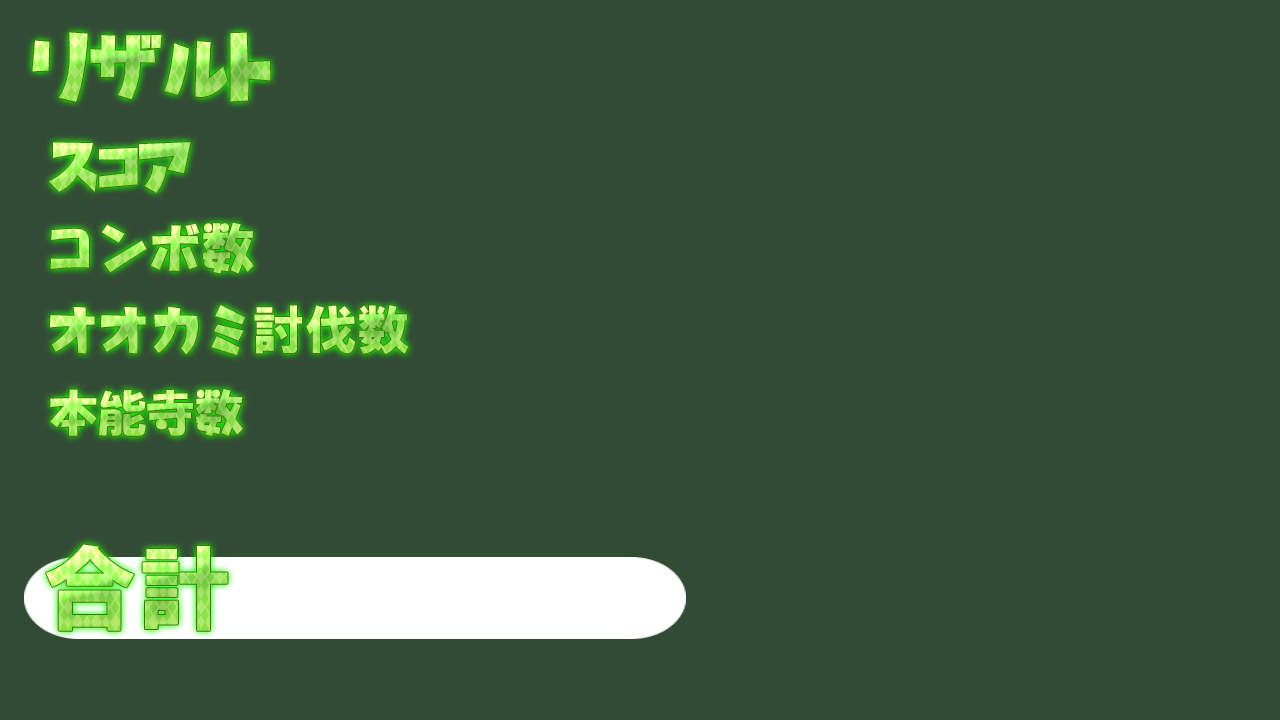
<style>
.page{position:relative;width:1280px;height:720px;background:#324b35}
.page>*{position:absolute;margin:0}
.t1{font:72px "KajudenFont-kana2"}
.t2{font:52.6px "KajudenFont-kana2"}
.t3{font:52.6px "HGSoeiKakupoptai"}
.t4{font:51.7px "KFhimajiKIDS"}
.t5{font:52.6px "HGSoeiKakugothicUB"}
.t6{font:48.6px "HGSoeiKakupoptai"}
</style>
<div class="page">
<p class="t1" style="left:32px;top:32px;width:239px;height:70px">リザルト</p>
<p class="t2" style="left:49px;top:142px;width:142px;height:51px">スコア</p>
<p class="t3" style="left:50px;top:222px;width:204px;height:52px">コンボ数</p>
<p class="t4" style="left:50px;top:305px;width:196px;height:50px">オオカミ</p>
<p class="t5" style="left:254px;top:305px;width:155px;height:49px">討伐数</p>
<p class="t6" style="left:50px;top:389px;width:193px;height:47px">本能寺数</p>
</div>
